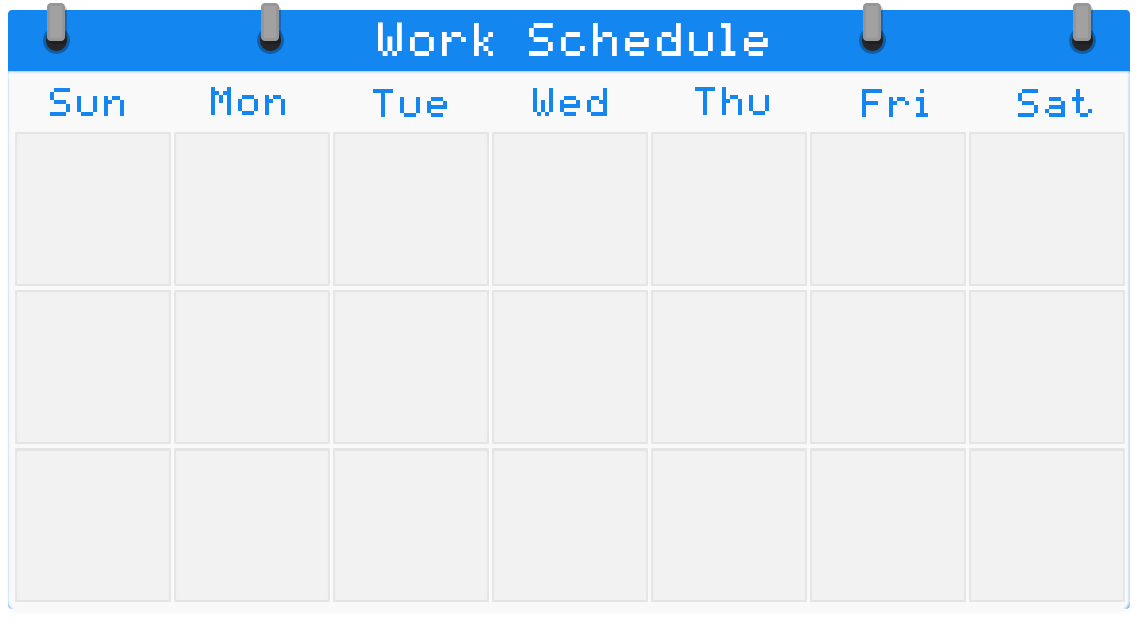
<style>
.page{position:relative;width:1137px;height:640px;background:#f3f2f2}
.page>*{position:absolute;margin:0}
.t1{font:37.6px "pixelmix";letter-spacing:0.1em;color:#ffffff}
.t2{font:32px "pixelmix";letter-spacing:0.1em;color:#1486f0}
</style>
<div class="page">
<p class="t1" style="left:378px;top:22px;width:390px;height:34px">Work Schedule</p>
<p class="t2" style="left:50px;top:88px;width:74px;height:28px">Sun</p>
<p class="t2" style="left:211px;top:87px;width:74px;height:28px">Mon</p>
<p class="t2" style="left:373px;top:89px;width:74px;height:28px">Tue</p>
<p class="t2" style="left:533px;top:88px;width:74px;height:28px">Wed</p>
<p class="t2" style="left:695px;top:87px;width:74px;height:28px">Thu</p>
<p class="t2" style="left:862px;top:89px;width:66px;height:28px">Fri</p>
<p class="t2" style="left:1018px;top:89px;width:74px;height:28px">Sat</p>
</div>
